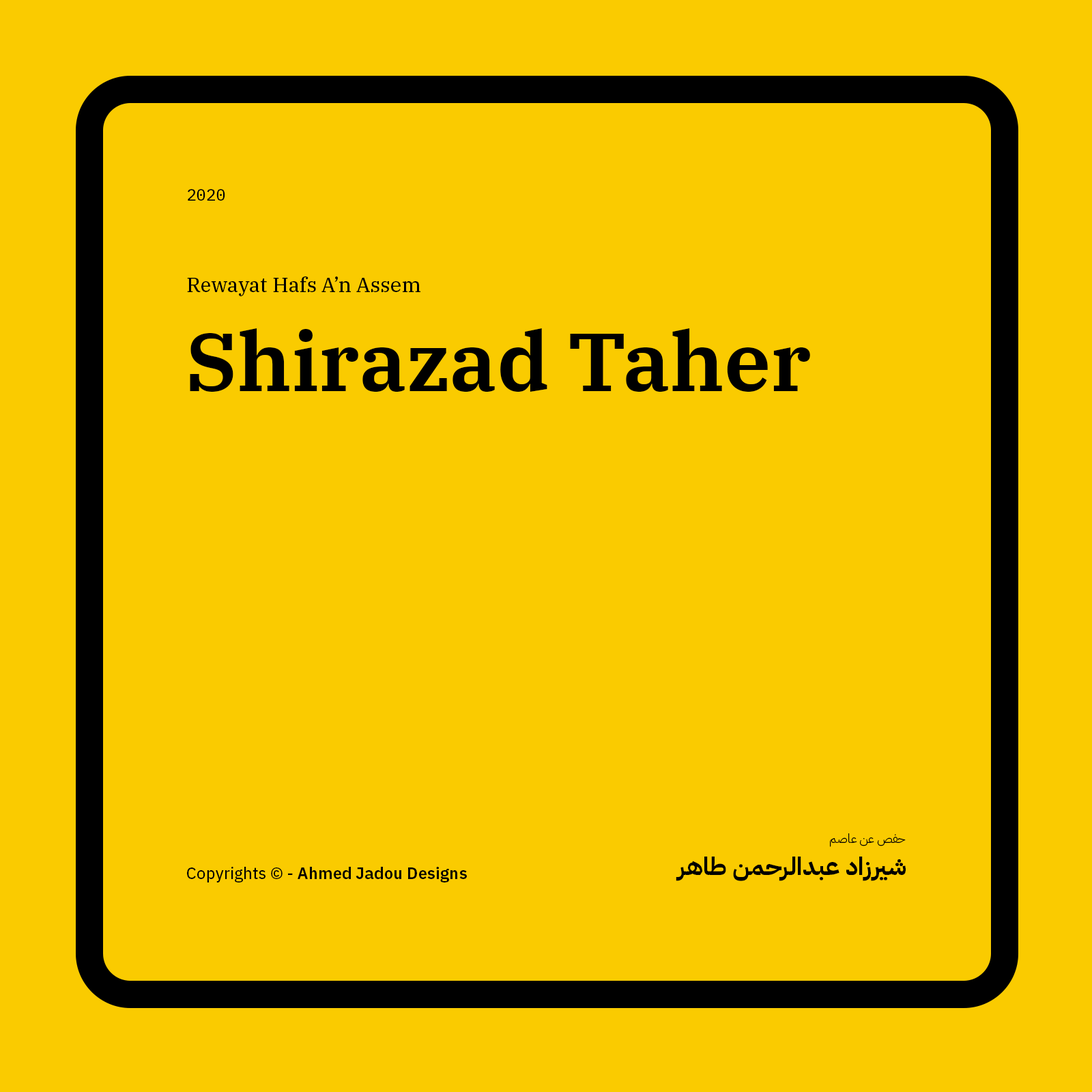
<style>
.page{position:relative;width:1092px;height:1092px;background:#facb00}
.page>*{position:absolute;margin:0}
.t1{font:16.4px "IBMPlexMono-Text";color:#000000}
.t2{font:20.5px "IBMPlexSerif-Text";color:#000000}
.t3{font:81.9px "IBMPlexSerif-SemiBold";color:#000000}
.t4{font:12.3px "IBMPlexArabic-Light";color:#000000}
.t5{font:24.6px "IBMPlexArabic-Bold";color:#000000}
.t6{font:16.4px "IBMPlexSans-SemiBold";color:#000000}
.t7{font:16.4px "IBMPlexSans-Text";color:#000000}
</style>
<div class="page">
<p class="t1" style="left:188px;top:189px;width:37px;height:12px">2020</p>
<p class="t2" style="left:187px;top:276px;width:233px;height:20px">Rewayat Hafs A’n Assem</p>
<p class="t3" style="left:190px;top:328px;width:620px;height:64px">Shirazad Taher</p>
<p class="t4" style="left:830px;top:833px;width:76px;height:14px">حفص عن عاصم</p>
<p class="t5" style="left:676px;top:857px;width:230px;height:24px">شيرزاد عبدالرحمن طاهر</p>
<p class="t6" style="left:187px;top:867px;width:280px;height:15px"><span class="t7">Copyrights © - </span>Ahmed Jadou Designs</p>
</div>
